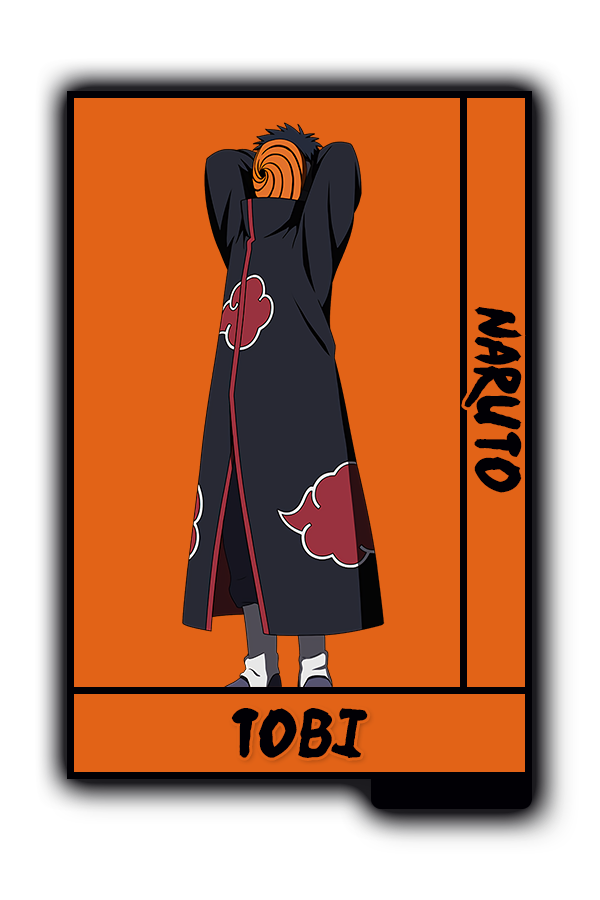
<style>
.page{position:relative;width:600px;height:900px;background:#e26317}
.page>*{position:absolute;margin:0}
.t1{font:52px "Ninja-Naruto";color:#010005}
.t2{font:55.4px "Ninja-Naruto";color:#010005}
</style>
<div class="page">
<p class="t1" style="left:464px;top:307px;width:59px;height:186px;rotate:90deg">Naruto</p>
<p class="t2" style="left:231px;top:708px;width:137px;height:50px">Tobi</p>
</div>
